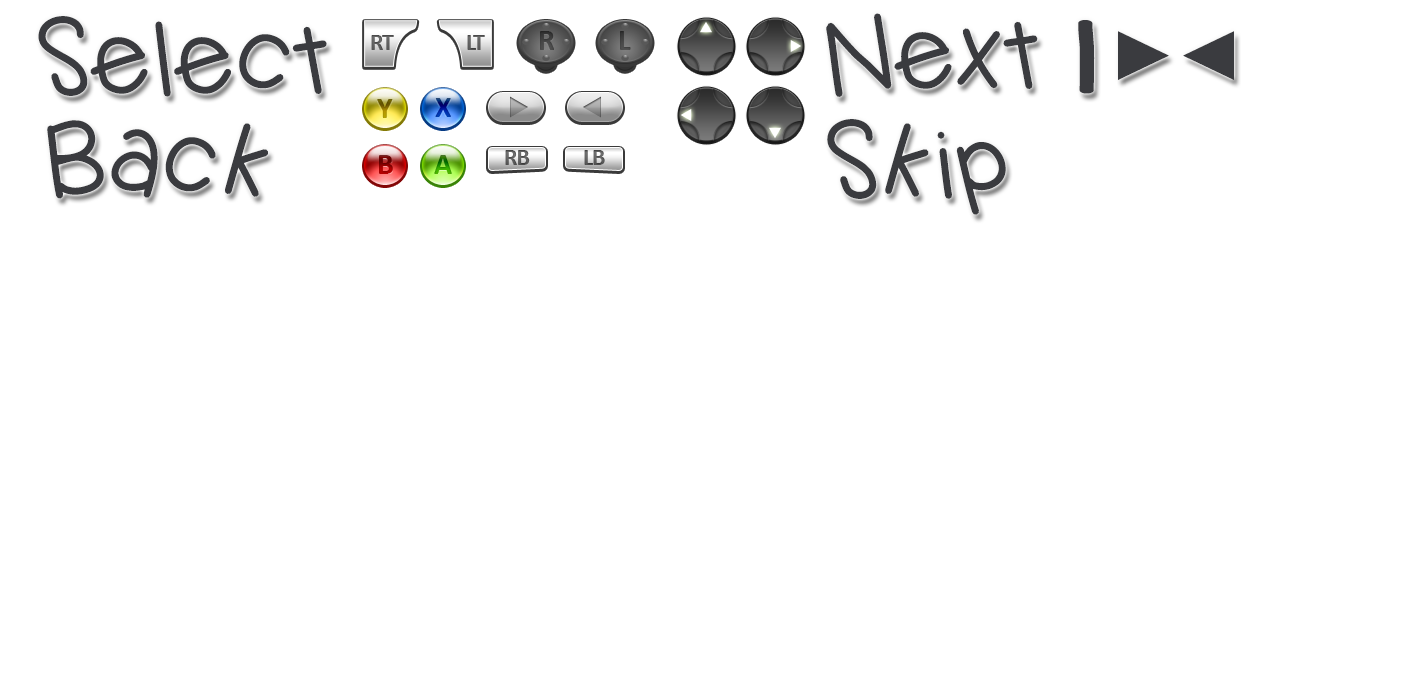
<style>
.page{position:relative;width:1426px;height:694px;background:#ffffff}
.page>*{position:absolute;margin:0}
.t1{font:99.6px "KBJellybean";letter-spacing:-0.04em;color:#3a3b3f}
.t2{font:99.6px "KBJellybean";letter-spacing:0.14em;color:#3a3b3f;scale:2.06 1}
</style>
<div class="page">
<p class="t1" style="left:38px;top:16px;width:289px;height:81px">Select</p>
<p class="t1" style="left:826px;top:13px;width:212px;height:84px">Next</p>
<p class="t2" style="left:1078px;top:20px;width:17px;height:74px">|</p>
<p class="t1" style="left:47px;top:120px;width:221px;height:79px">Back</p>
<p class="t1" style="left:827px;top:119px;width:179px;height:96px">Skip</p>
</div>
